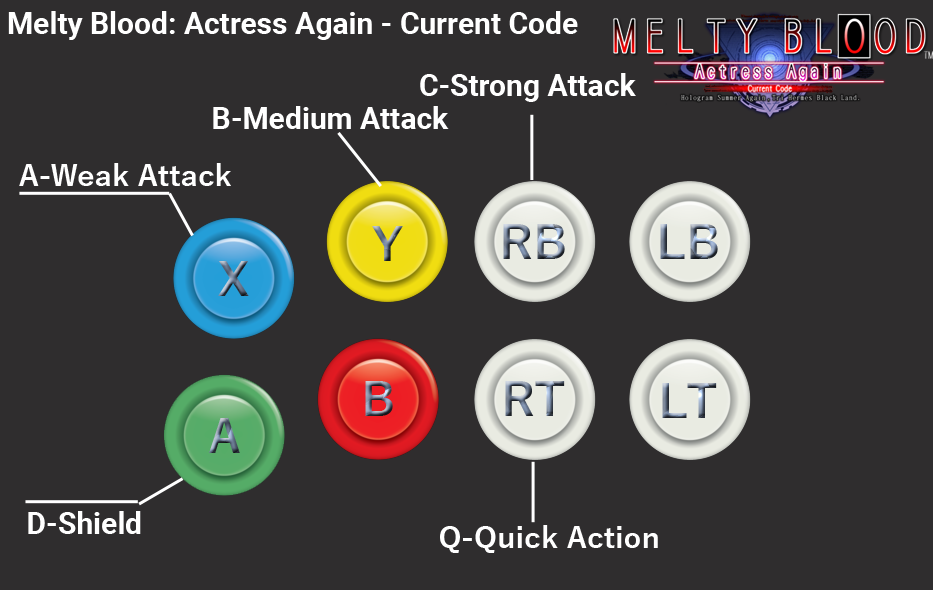
<style>
.page{position:relative;width:933px;height:590px;background:#2f2d2e}
.page>*{position:absolute;margin:0}
.t1{font:30px "Roboto-Bold";color:#ffffff}
.t2{font:30px "YuGothic-Bold";color:#ffffff}
</style>
<div class="page">
<p class="t1" style="left:8px;top:11px;width:570px;height:29px">Melty Blood: Actress Again - Current Code</p>
<p class="t1" style="left:420px;top:73px;width:216px;height:29px">C-Strong Attack</p>
<p class="t1" style="left:213px;top:106px;width:236px;height:23px">B-Medium Attack</p>
<p class="t2" style="left:19px;top:163px;width:212px;height:23px">A-Weak Attack</p>
<p class="t1" style="left:28px;top:511px;width:113px;height:23px">D-Shield</p>
<p class="t2" style="left:440px;top:525px;width:218px;height:28px">Q-Quick Action</p>
</div>
